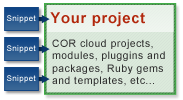
<style>
.page{position:relative;width:183px;height:100px;background:#dbeadb}
.page>*{position:absolute;margin:0}
.t1{font:8px "ArialMT";letter-spacing:0.04em}
.t2{font:15px "Arial-BoldMT";letter-spacing:0.04em;color:#b2270c}
.t3{font:10.5px "ArialMT";letter-spacing:0.04em;color:#313131}
</style>
<div class="page">
<p class="t1" style="left:7px;top:15px;width:29px;height:8px">Snippet</p>
<p class="t2" style="left:50px;top:12px;width:95px;height:15px">Your project</p>
<p class="t3" style="left:52px;top:39px;width:113px;height:47px">COR cloud projects, modules, pluggins and packages, Ruby gems and templates, etc...</p>
<p class="t1" style="left:7px;top:45px;width:29px;height:8px">Snippet</p>
<p class="t1" style="left:7px;top:75px;width:29px;height:8px">Snippet</p>
</div>
